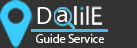
<style>
.page{position:relative;width:137px;height:48px;background:#333333}
.page>*{position:absolute;margin:0}
.t1{font:24.6px "MyriadPro-Regular";color:#ffffff}
.t2{font:12px "MyriadPro-Regular";color:#ffffff}
</style>
<div class="page">
<p class="t1" style="left:37px;top:7px;width:15px;height:17px">D</p>
<p class="t1" style="left:57px;top:10px;width:11px;height:12px">a</p>
<p class="t2" style="left:36px;top:34px;width:68px;height:9px">Guide Service</p>
</div>
